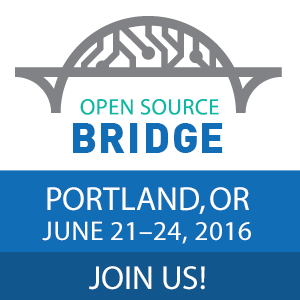
<style>
.page{position:relative;width:300px;height:300px;background:#ffffff}
.page>*{position:absolute;margin:0}
.t1{font:22.4px "DIN-Bold";letter-spacing:0.02em;color:#08b9a6}
.t2{font:41.6px "DIN-Black";letter-spacing:0.06em;color:#116db6}
.t3{font:41.6px "DIN-Black";letter-spacing:0.02em;color:#116db6}
.t4{font:41.6px "DIN-Black";letter-spacing:0.03em;color:#116db6}
.t5{font:27.2px/30.2px "DIN-Bold";letter-spacing:0.02em;color:#ffffff}
.t6{font:33.2px/30.2px "DIN-Bold";color:#ffffff}
.t7{font:33.2px "DIN-Bold";color:#ffffff}
</style>
<div class="page">
<p class="t1" style="left:80px;top:99px;width:139px;height:16px">OPEN SOURCE</p>
<p class="t2" style="left:73px;top:123px;width:150px;height:30px"><span class="t3">B</span>RI<span class="t4">D</span><span class="t3">GE</span></p>
<p class="t5" style="left:42px;top:187px;width:209px;height:57px;text-align:center"><span class="t6">PORTLAND, OR<br></span>JUNE 21–24, 2016</p>
<p class="t7" style="left:89px;top:266px;width:116px;height:24px">JOIN US!</p>
</div>
